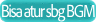
<style>
.page{position:relative;width:96px;height:22px;background:#25a4a6}
.page>*{position:absolute;margin:0}
.t1{font:18px "AdobeClean-Regular";letter-spacing:-0.08em;color:#ffffff;scale:0.86 1}
</style>
<div class="page">
<p class="t1" style="left:2px;top:3px;width:93px;height:19px">Bisa atur sbg BGM</p>
</div>
